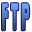
<style>
.page{position:relative;width:32px;height:32px;background:#ffffff}
.page>*{position:absolute;margin:0}
.t1{font:26.5px "Star-Vader-Regular";letter-spacing:0.46em;font-weight:bold;scale:0.27 1}
</style>
<div class="page">
<p class="t1" style="left:2px;top:3px;width:28px;height:28px">FTP</p>
</div>
